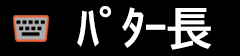
<style>
.page{position:relative;width:240px;height:56px;background:#000000}
.page>*{position:absolute;margin:0}
.t1{font:44.8px "BIZ-UDPGothic-Bold";color:#ffffff}
</style>
<div class="page">
<p class="t1" style="left:77px;top:6px;width:134px;height:44px">ﾊﾟﾀｰ長</p>
</div>
